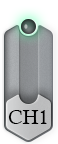
<style>
.page{position:relative;width:58px;height:144px}
.page>*{position:absolute;margin:0}
.t1{font:20px "CalistoMT";color:#000000}
</style>
<div class="page">
<p class="t1" style="left:8px;top:110px;width:39px;height:14px">CH1</p>
</div>
